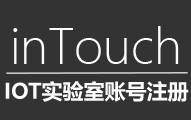
<style>
.page{position:relative;width:191px;height:120px;background:#333333}
.page>*{position:absolute;margin:0}
.t1{font:48px "MicrosoftYaHeiLight";color:#fcfcfe}
.t2{font:21px "MicrosoftYaHei-Bold";color:#fcfcfe}
</style>
<div class="page">
<p class="t1" style="left:13px;top:26px;width:166px;height:38px">inTouch</p>
<p class="t2" style="left:5px;top:81px;width:184px;height:21px">IOT实验室账号注册</p>
</div>
